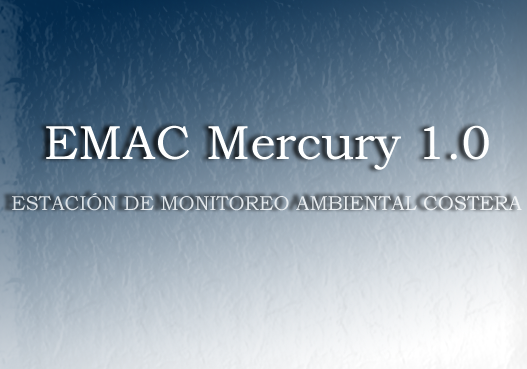
<style>
.page{position:relative;width:527px;height:369px}
.page>*{position:absolute;margin:0}
.t1{font:48px "BookmanOldStyle";color:#feffff}
.t2{font:20px "BookmanOldStyle";color:#e4e9ec}
</style>
<div class="page">
<p class="t1" style="left:46px;top:125px;width:443px;height:45px">EMAC Mercury 1.0</p>
<p class="t2" style="left:12px;top:193px;width:510px;height:18px">ESTACIÓN DE MONITOREO AMBIENTAL COSTERA</p>
</div>
